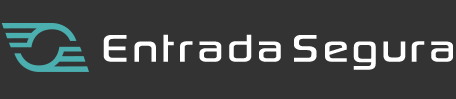
<style>
.page{position:relative;width:456px;height:99px;background:#333333}
.page>*{position:absolute;margin:0}
.t1{font:55px "SonySketchEF";letter-spacing:0.045em;color:#ffffff;scale:0.95 1}
</style>
<div class="page">
<p class="t1" style="left:103px;top:34px;width:178px;height:28px">Entrada</p>
<p class="t1" style="left:294px;top:35px;width:159px;height:35px">Segura</p>
</div>
